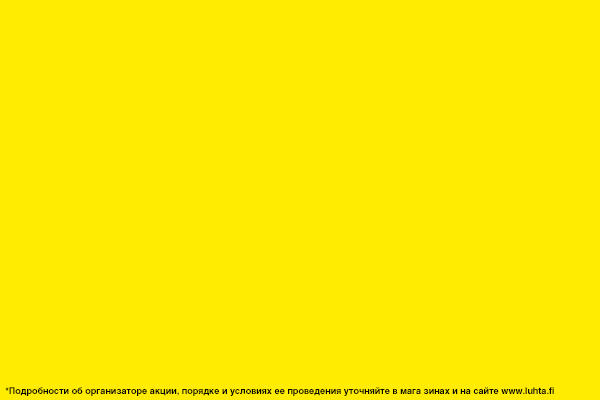
<style>
.page{position:relative;width:600px;height:400px;background:#ffec00}
.page>*{position:absolute;margin:0}
.t1{font:9px "Helios-Bold";color:#000000}
</style>
<div class="page">
<p class="t1" style="left:5px;top:387px;width:549px;height:9px">*Подробности об организаторе акции, порядке и условиях ее проведения уточняйте в мага зинах и на сайте www.luhta.fi</p>
</div>
